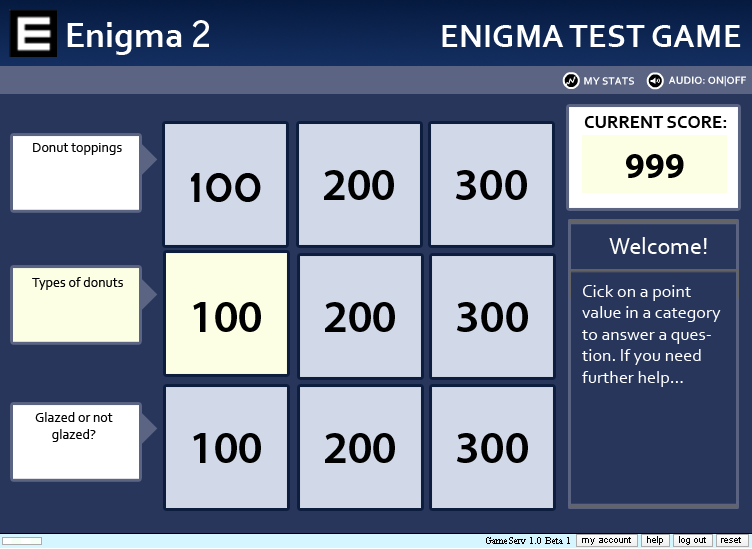
<style>
.page{position:relative;width:752px;height:549px;background:#28365c}
.page>*{position:absolute;margin:0}
.t1{font:36px "Corbel-Bold";color:#ffffff}
.t2{font:36px "BellGothicStd-Bold";color:#ffffff}
.t3{font:33.4px "Corbel-Bold";color:#ffffff}
.t4{font:18px "Corbel-Bold";color:#000000}
.t5{font:14px "Corbel";color:#000000}
.t6{font:36px "MyriadPro-Bold";color:#000000}
.t7{font:36px "TratexVit";color:#000000}
.t8{font:46px "MyriadPro-Semibold";color:#000000}
.t9{font:24px "Corbel";color:#ffffff}
.t10{font:18px "Corbel";color:#ffffff}
</style>
<div class="page">
<p class="t1" style="left:67px;top:20px;width:142px;height:35px">Enigma <span class="t2">2</span></p>
<p class="t3" style="left:442px;top:25px;width:299px;height:22px">ENIGMA TEST GAME</p>
<p class="t4" style="left:584px;top:116px;width:143px;height:12px">CURRENT SCORE:</p>
<p class="t5" style="left:33px;top:143px;width:89px;height:12px">Donut toppings</p>
<p class="t6" style="left:626px;top:154px;width:58px;height:24px">999</p>
<p class="t7" style="left:191px;top:173px;width:70px;height:29px">100</p>
<p class="t8" style="left:324px;top:170px;width:70px;height:30px">200</p>
<p class="t8" style="left:456px;top:170px;width:71px;height:30px">300</p>
<p class="t9" style="left:609px;top:237px;width:98px;height:17px">Welcome!</p>
<p class="t5" style="left:32px;top:277px;width:91px;height:13px">Types of donuts</p>
<p class="t10" style="left:582px;top:285px;width:139px;height:102px">Cick on a point value in a category to answer a question. If you need further help...</p>
<p class="t8" style="left:193px;top:302px;width:68px;height:30px">100</p>
<p class="t8" style="left:325px;top:302px;width:70px;height:30px">200</p>
<p class="t8" style="left:457px;top:302px;width:71px;height:30px">300</p>
<p class="t5" style="left:35px;top:412px;width:78px;height:30px">Glazed or not <br>      glazed?</p>
<p class="t8" style="left:193px;top:433px;width:68px;height:30px">100</p>
<p class="t8" style="left:325px;top:433px;width:70px;height:30px">200</p>
<p class="t8" style="left:457px;top:433px;width:71px;height:30px">300</p>
</div>
